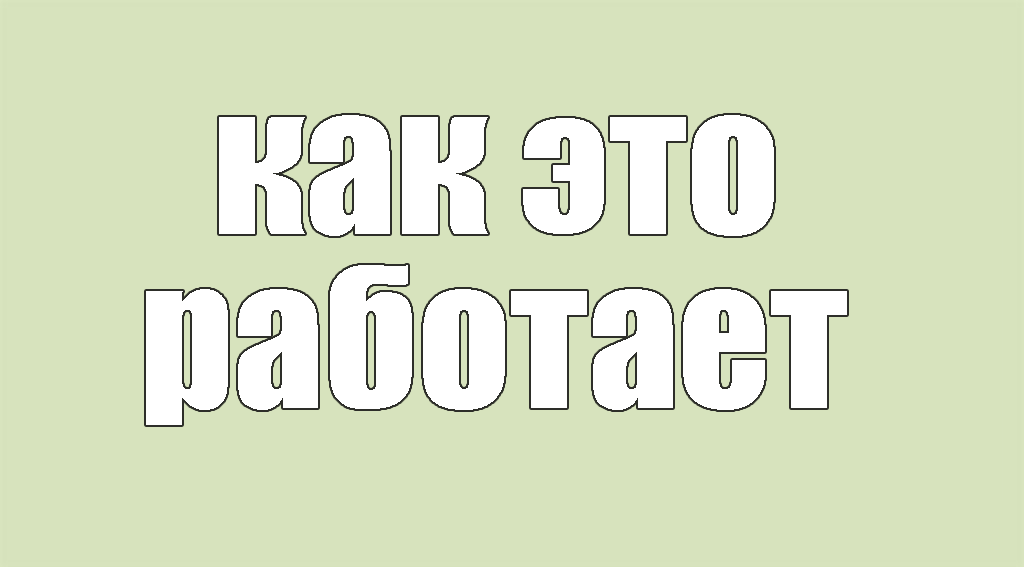
<style>
.page{position:relative;width:1024px;height:567px;background:#d7e3bd}
.page>*{position:absolute;margin:0}
.t1{font:180px "Impact";color:#ffffff}
</style>
<div class="page">
<p class="t1" style="left:219px;top:115px;width:555px;height:121px">как это</p>
<p class="t1" style="left:146px;top:265px;width:701px;height:160px">работает</p>
</div>
